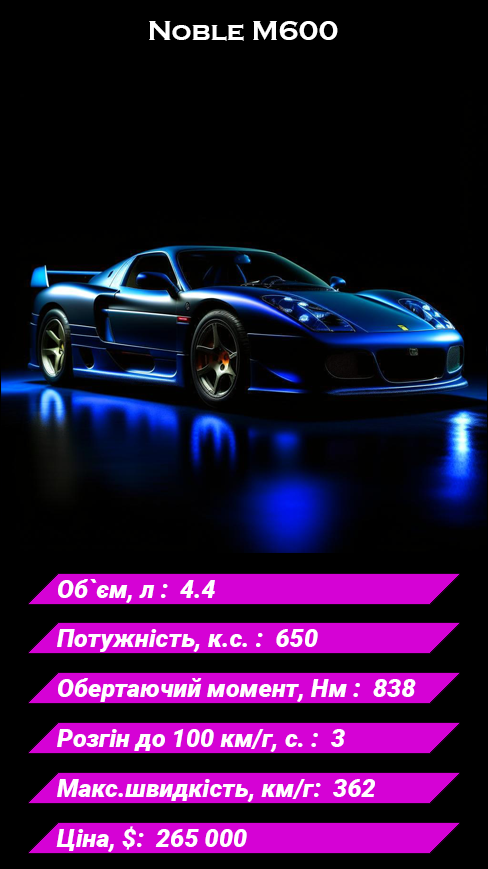
<style>
.page{position:relative;width:488px;height:869px;background:#000000}
.page>*{position:absolute;margin:0}
.t1{font:28px "CopperplateGothic-Bold";color:#ffffff}
.t2{font:25px "Roboto-BlackItalic";color:#ffffff}
</style>
<div class="page">
<p class="t1" style="left:149px;top:21px;width:189px;height:20px">Noble M600</p>
<p class="t2" style="left:58px;top:579px;width:157px;height:24px">Об`єм, л :  4.4</p>
<p class="t2" style="left:57px;top:629px;width:261px;height:23px">Потужність, к.с. :  650</p>
<p class="t2" style="left:58px;top:678px;width:358px;height:24px">Обертаючий момент, Нм :  838</p>
<p class="t2" style="left:57px;top:729px;width:288px;height:23px">Розгін до 100 км/г, с. :  3</p>
<p class="t2" style="left:57px;top:779px;width:318px;height:23px">Макс.швидкість, км/г:  362</p>
<p class="t2" style="left:56px;top:826px;width:191px;height:26px">Ціна, $:  265 000</p>
</div>
